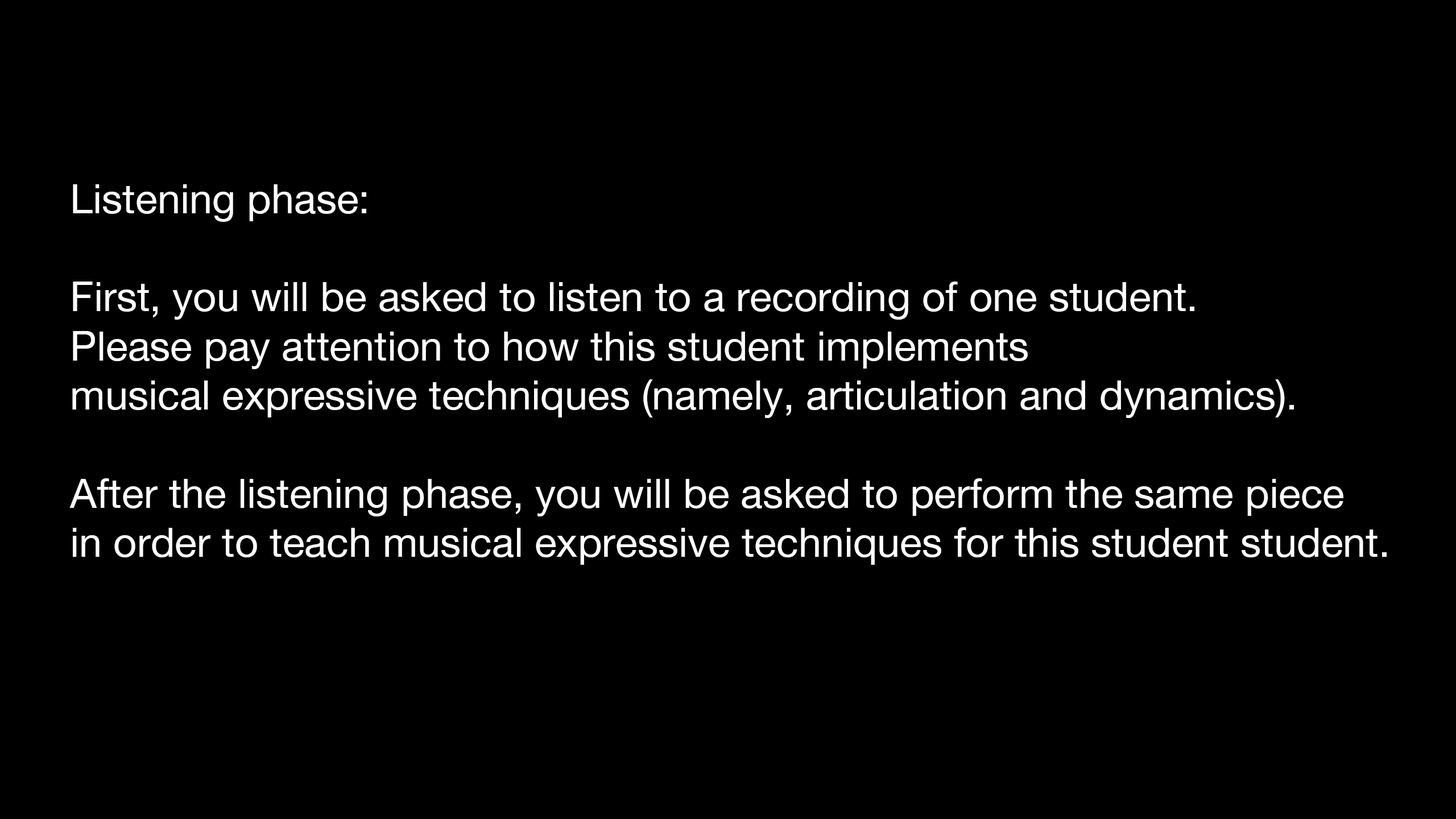
<style>
.page{position:relative;width:1456px;height:819px;background:#000000}
.page>*{position:absolute;margin:0}
.t1{font:40.9px "HelveticaNeue";color:#ffffff}
</style>
<div class="page">
<p class="t1" style="left:69px;top:184px;width:1318px;height:381px">Listening phase:<br><br>First, you will be asked to listen to a recording of one student.<br>Please pay attention to how this student implements<br>musical expressive techniques (namely, articulation and dynamics).<br><br>After the listening phase, you will be asked to perform the same piece<br>in order to teach musical expressive techniques for this student student.</p>
</div>
